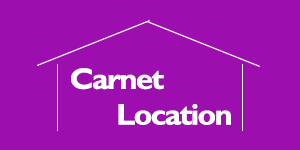
<style>
.page{position:relative;width:300px;height:150px;background:#9c0ead}
.page>*{position:absolute;margin:0}
.t1{font:29.8px/8.9px "GillSansMT-Bold";letter-spacing:-0.05em;color:#ffffff;scale:1.04 1}
</style>
<div class="page">
<p class="t1" style="left:71px;top:68px;width:160px;height:57px;text-align:justify">Carnet<br><br><br><br> Location</p>
</div>
